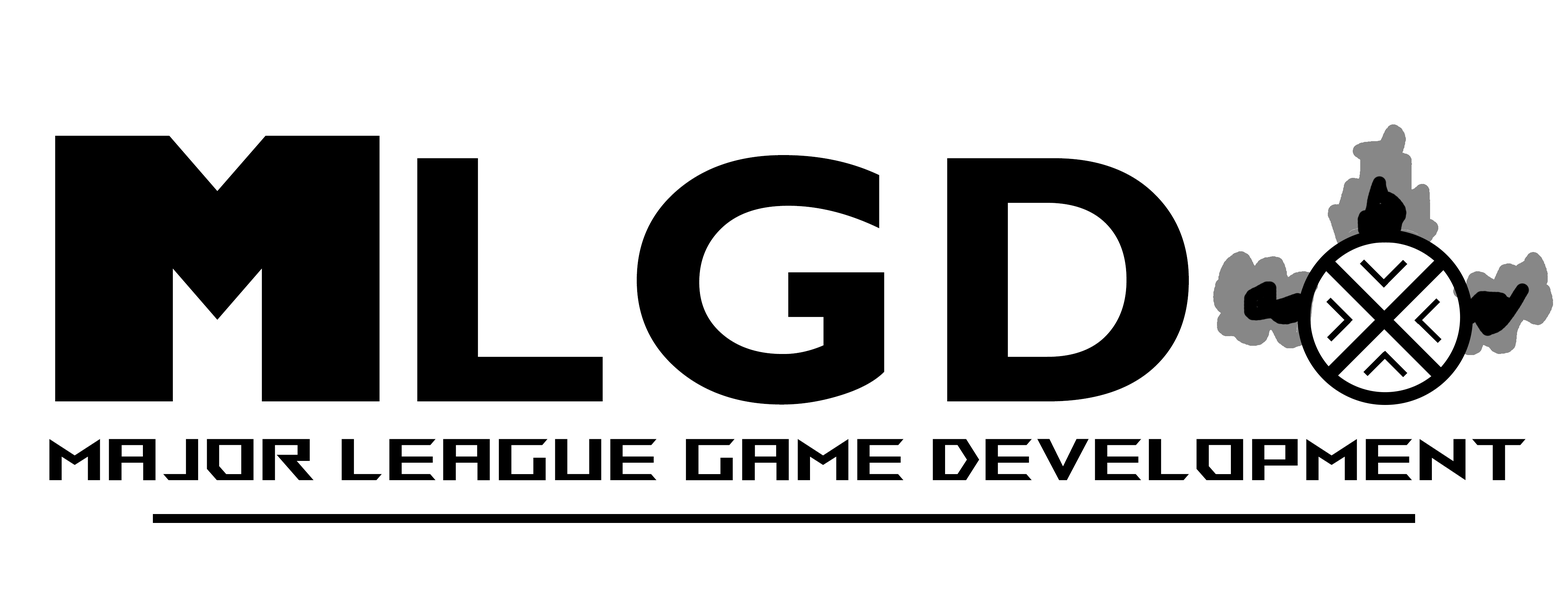
<style>
.page{position:relative;width:1568px;height:606px;background:#ffffff}
.page>*{position:absolute;margin:0}
.t1{font:356.4px "GillSansMT-Bold";letter-spacing:0.03em;color:#000000}
.t2{font:356.4px "GillSans-UltraBold";letter-spacing:0.03em;color:#000000}
.t3{font:58.8px "ROGFonts-Regular";letter-spacing:0.07em;color:#000000}
</style>
<div class="page">
<p class="t1" style="left:55px;top:135px;width:1134px;height:269px"><span class="t2">M</span>LGD</p>
<p class="t3" style="left:49px;top:439px;width:1477px;height:41px">Major League Game Development</p>
</div>
